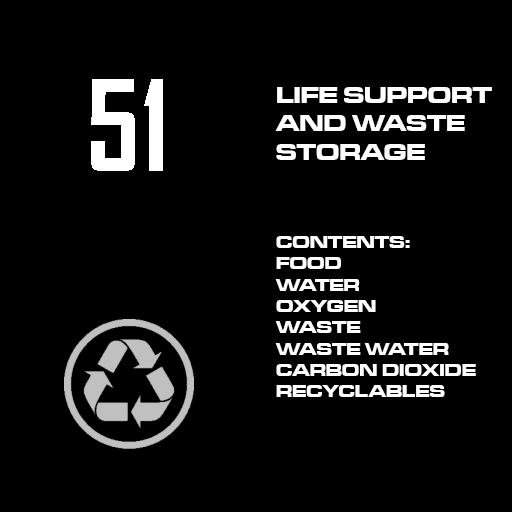
<style>
.page{position:relative;width:512px;height:512px;background:#000000}
.page>*{position:absolute;margin:0}
.t1{font:23.7px "MicrogrammaD-BoldExte";color:#ffffff}
.t2{font:17.8px "MicrogrammaD-BoldExte";color:#ffffff}
</style>
<div class="page">
<p class="t1" style="left:275px;top:87px;width:217px;height:73px">LIFE SUPPORT<br>AND WASTE<br>STORAGE</p>
<p class="t2" style="left:275px;top:236px;width:201px;height:161px">CONTENTS:<br>FOOD<br>WATER<br>OXYGEN<br>WASTE<br>WASTE WATER<br>CARBON DIOXIDE<br>RECYCLABLES</p>
</div>
